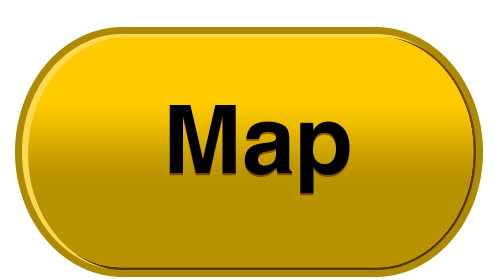
<style>
.page{position:relative;width:498px;height:280px;background:#b89200}
.page>*{position:absolute;margin:0}
.t1{font:95px "Helvetica-Bold";color:#000000}
</style>
<div class="page">
<p class="t1" style="left:169px;top:105px;width:181px;height:89px">Map</p>
</div>
